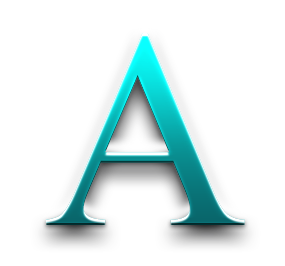
<style>
.page{position:relative;width:285px;height:266px;background:#ffffff}
.page>*{position:absolute;margin:0}
.t1{font:283.1px "TimesNewRomanPSMT"}
</style>
<div class="page">
<p class="t1" style="left:46px;top:33px;width:199px;height:192px">A</p>
<p class="t1" style="left:46px;top:33px;width:199px;height:192px">A</p>
<p class="t1" style="left:46px;top:33px;width:199px;height:192px">A</p>
<p class="t1" style="left:46px;top:33px;width:199px;height:192px">A</p>
</div>
